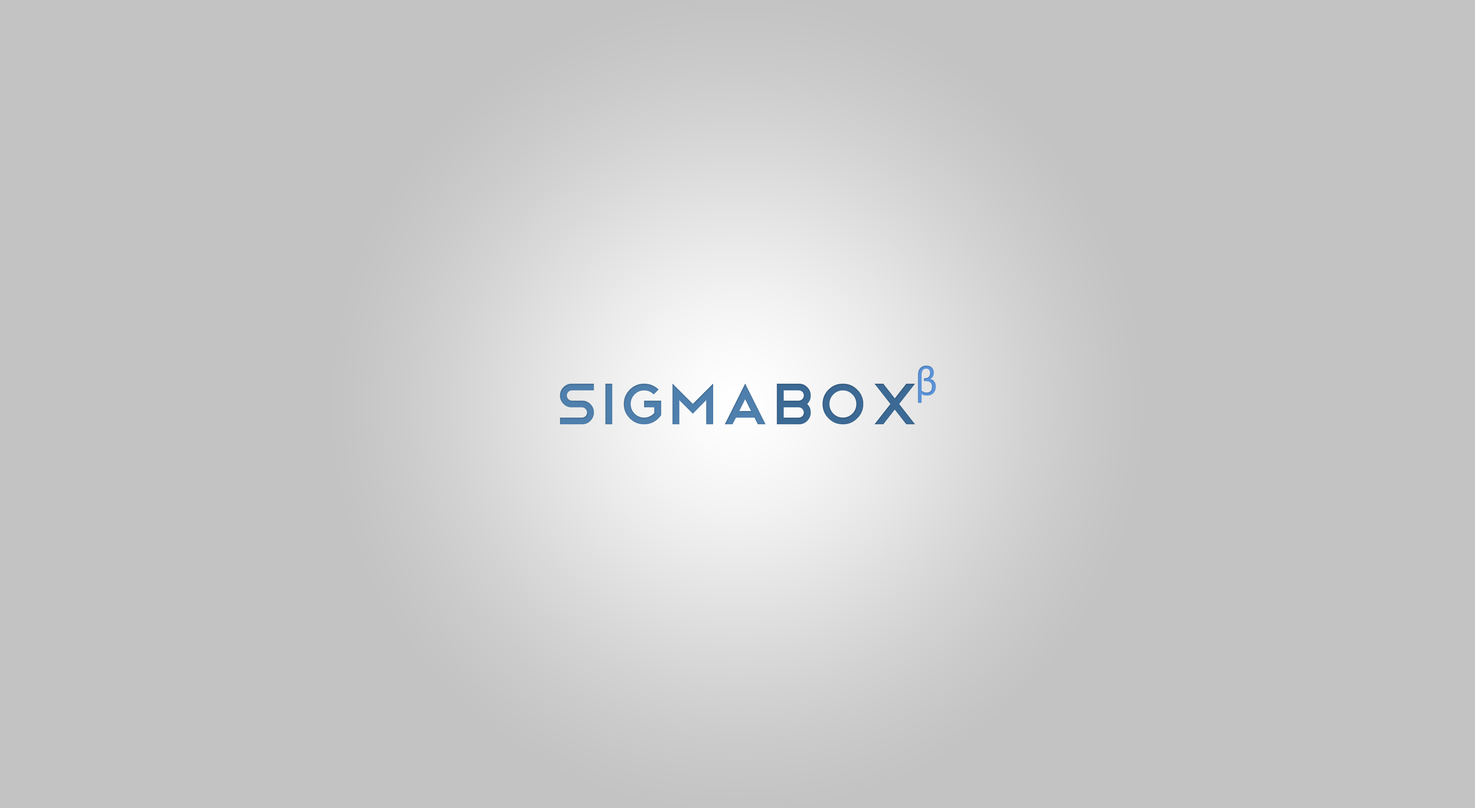
<style>
.page{position:relative;width:1475px;height:808px;background:#c3c3c3}
.page>*{position:absolute;margin:0}
.t1{font:43.1px "Calibri";color:#5c95dc}
.t2{font:75.9px "Telegrafico";color:#4f80ad}
.t3{font:75.9px "Telegrafico";color:#3c6a95}
</style>
<div class="page">
<p class="t1" style="left:918px;top:366px;width:18px;height:37px">β</p>
<p class="t2" style="left:560px;top:384px;width:355px;height:40px">Sigma<span class="t3">box</span></p>
</div>
